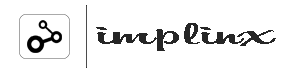
<style>
.page{position:relative;width:283px;height:72px;background:#ffffff}
.page>*{position:absolute;margin:0}
.t1{font:32.4px "Billabong";color:#262626;scale:2.54 1}
</style>
<div class="page">
<p class="t1" style="left:96px;top:23px;width:180px;height:28px">implinx</p>
</div>
